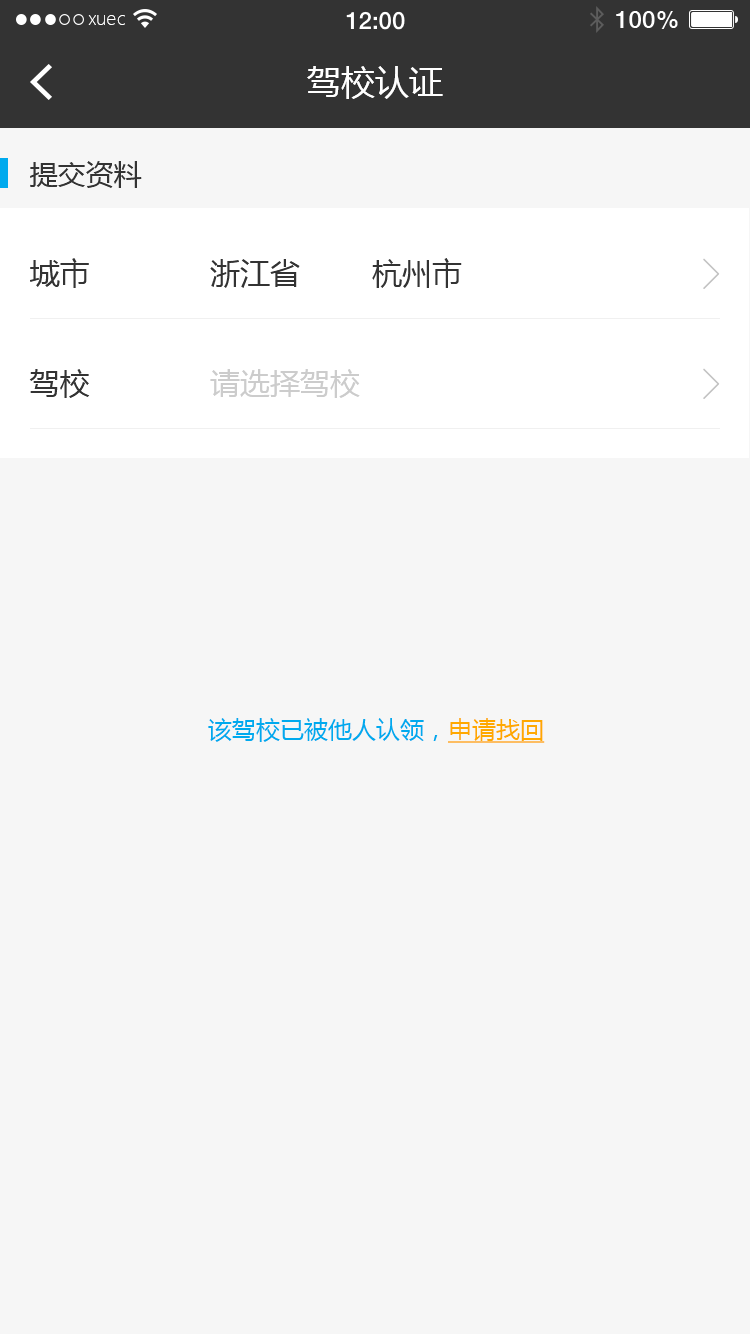
<style>
.page{position:relative;width:750px;height:1334px;background:#f6f6f6}
.page>*{position:absolute;margin:0}
.t1{font:18px "MicrosoftYaHeiLight";color:#ffffff}
.t2{font:34px "MicrosoftYaHei";color:#ffffff}
.t3{font:28px "MicrosoftYaHei";color:#333333}
.t4{font:30px "MicrosoftYaHei";color:#333333}
.t5{font:30px "MicrosoftYaHei";color:#cccccc}
.t6{font:24px "MicrosoftYaHei";color:#00aaee}
.t7{font:24px "MicrosoftYaHei";color:#ffa800;text-decoration:underline}
</style>
<div class="page">
<p class="t1" style="left:88px;top:15px;width:37px;height:10px">xuec</p>
<p class="t2" style="left:307px;top:66px;width:136px;height:33px">驾校认证</p>
<p class="t3" style="left:30px;top:161px;width:112px;height:27px">提交资料</p>
<p class="t4" style="left:30px;top:258px;width:59px;height:30px">城市</p>
<p class="t4" style="left:210px;top:258px;width:252px;height:30px">浙江省        杭州市</p>
<p class="t4" style="left:29px;top:369px;width:61px;height:29px">驾校</p>
<p class="t5" style="left:210px;top:369px;width:150px;height:29px">请选择驾校</p>
<p class="t6" style="left:208px;top:718px;width:337px;height:25px">该驾校已被他人认领，<span class="t7">申请找回</span></p>
</div>
